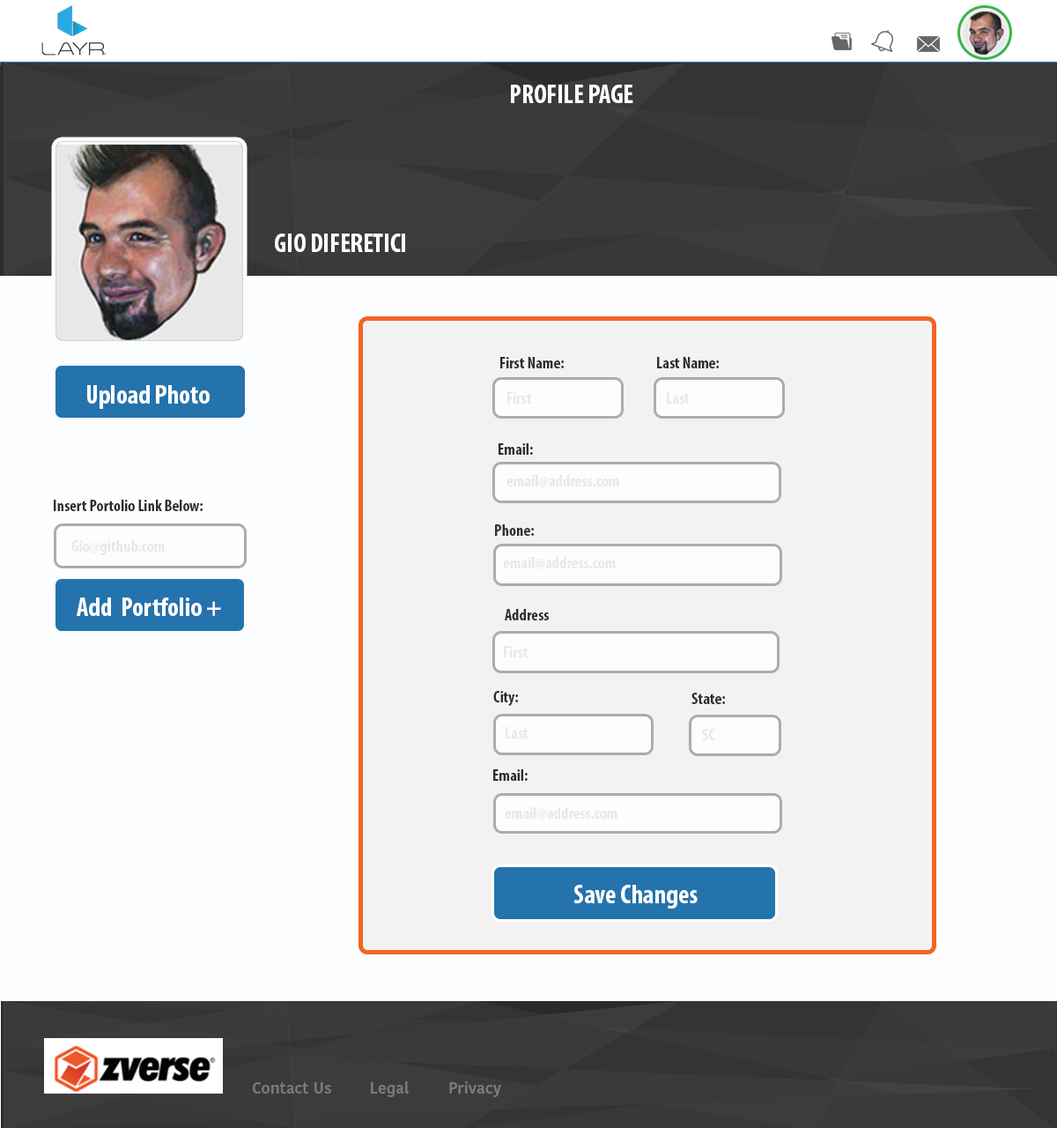
<style>
.page{position:relative;width:1057px;height:1128px;background:#fdfeff}
.page>*{position:absolute;margin:0}
.t1{font:26.4px "MyriadPro-BoldCond";color:#fffefe}
.t2{font:16.4px "MyriadPro-BoldCond";color:#2e2e2e}
.t3{font:16.4px "MyriadPro-BoldCond";color:#ebe7e7}
.t4{font:15.9px "KohinoorDevanagari-Medium";color:#7a7b7c}
</style>
<div class="page">
<p class="t1" style="left:511px;top:85px;width:123px;height:18px">PROFILE PAGE</p>
<p class="t1" style="left:275px;top:233px;width:130px;height:19px">GIO DIFERETICI</p>
<p class="t2" style="left:500px;top:357px;width:64px;height:11px">First Name:</p>
<p class="t2" style="left:657px;top:357px;width:62px;height:11px">Last Name:</p>
<p class="t1" style="left:87px;top:385px;width:123px;height:24px">Upload Photo</p>
<p class="t3" style="left:508px;top:392px;width:24px;height:12px">First</p>
<p class="t3" style="left:667px;top:392px;width:23px;height:12px">Last</p>
<p class="t2" style="left:499px;top:443px;width:34px;height:12px">Email:</p>
<p class="t3" style="left:507px;top:475px;width:112px;height:13px">email@address.com</p>
<p class="t2" style="left:54px;top:500px;width:149px;height:11px">Insert Portolio Link Below:</p>
<p class="t2" style="left:495px;top:524px;width:39px;height:12px">Phone:</p>
<p class="t3" style="left:71px;top:540px;width:94px;height:15px">Gio@github.com</p>
<p class="t3" style="left:503px;top:557px;width:113px;height:13px">email@address.com</p>
<p class="t1" style="left:77px;top:597px;width:144px;height:19px">Add  Portfolio +</p>
<p class="t2" style="left:505px;top:609px;width:44px;height:11px">Address</p>
<p class="t3" style="left:504px;top:646px;width:25px;height:11px">First</p>
<p class="t2" style="left:493px;top:691px;width:25px;height:15px">City:</p>
<p class="t2" style="left:692px;top:693px;width:33px;height:11px">State:</p>
<p class="t3" style="left:506px;top:727px;width:23px;height:11px">Last</p>
<p class="t3" style="left:702px;top:729px;width:13px;height:11px">SC</p>
<p class="t2" style="left:493px;top:769px;width:35px;height:12px">Email:</p>
<p class="t3" style="left:505px;top:807px;width:113px;height:13px">email@address.com</p>
<p class="t1" style="left:574px;top:885px;width:124px;height:23px">Save Changes</p>
<p class="t4" style="left:253px;top:1081px;width:248px;height:16px">Contact Us  Legal   Privacy Policy</p>
</div>
